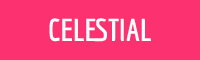
<style>
.page{position:relative;width:200px;height:60px;background:#fb326f}
.page>*{position:absolute;margin:0}
.t1{font:31px "Economica-Bold";color:#ffffff;text-transform:uppercase}
</style>
<div class="page">
<p class="t1" style="left:49px;top:18px;width:102px;height:24px">celestial</p>
</div>
